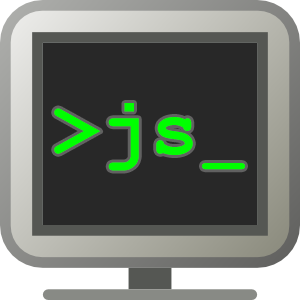
<style>
.page{position:relative;width:300px;height:300px;background:#282828}
.page>*{position:absolute;margin:0}
.t1{font:80.4px "CourierNewPS-BoldMT";color:#00ff00}
.t2{font:63.1px "CourierNewPS-BoldMT";color:#00ff00}
</style>
<div class="page">
<p class="t1" style="left:54px;top:108px;width:47px;height:46px">&gt;</p>
<p class="t1" style="left:108px;top:103px;width:85px;height:68px">js</p>
<p class="t2" style="left:202px;top:163px;width:43px;height:7px">_</p>
</div>
